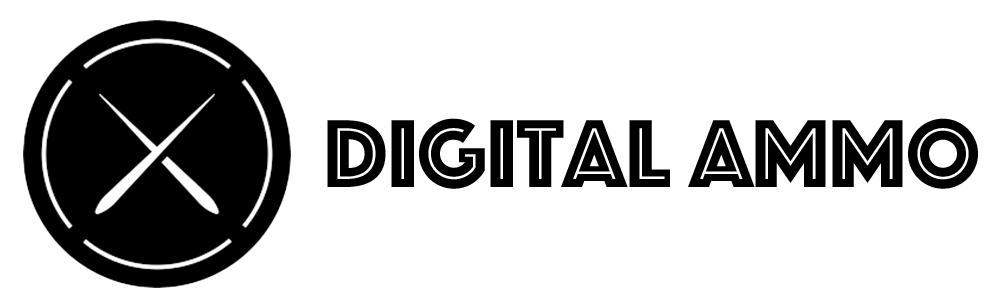
<style>
.page{position:relative;width:1000px;height:308px;background:#ffffff}
.page>*{position:absolute;margin:0}
.t1{font:100px "Phosphate-Inline";color:#000000}
</style>
<div class="page">
<p class="t1" style="left:327px;top:118px;width:651px;height:71px">Digital Ammo</p>
</div>
